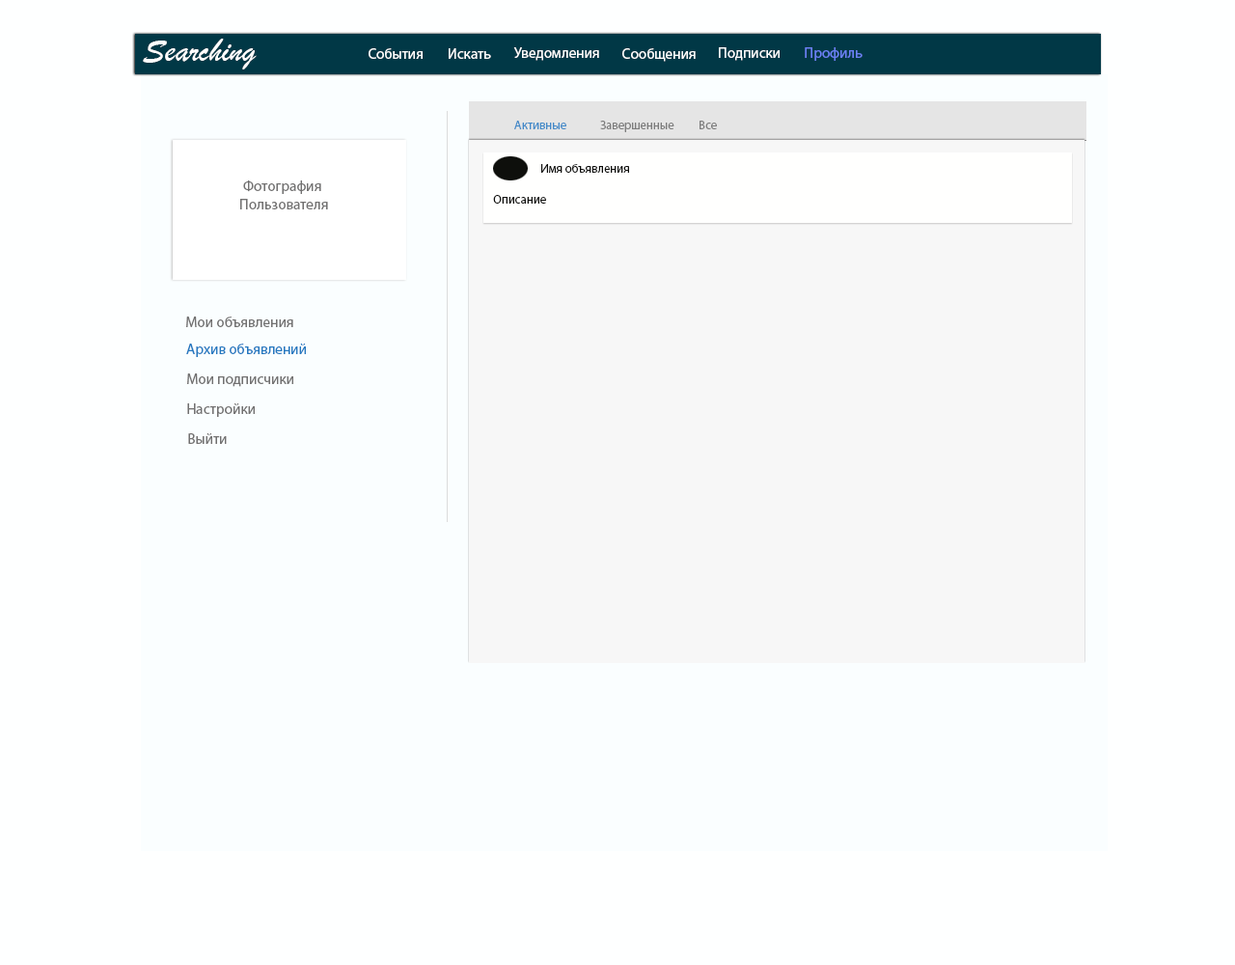
<style>
.page{position:relative;width:1235px;height:965px;background:#feffff}
.page>*{position:absolute;margin:0}
.t1{font:34.3px "BrushScriptMT";color:#ffffff}
.t2{font:14.7px "MyriadPro-Regular";color:#ffffff}
.t3{font:14.7px "MyriadPro-Regular";color:#6a81f6}
.t4{font:12.3px "MyriadPro-Regular";color:#4289c8}
.t5{font:12.3px "MyriadPro-Regular";color:#7c7c7c}
.t6{font:12.3px "MyriadPro-Regular";color:#0e0e0c}
.t7{font:14.7px "MyriadPro-Regular";color:#727171}
.t8{font:14.7px "MyriadPro-Regular";color:#2378c0}
</style>
<div class="page">
<p class="t1" style="left:143px;top:39px;width:114px;height:30px">Searching</p>
<p class="t2" style="left:369px;top:48px;width:54px;height:11px">События</p>
<p class="t2" style="left:449px;top:48px;width:42px;height:11px">Искать</p>
<p class="t2" style="left:513px;top:47px;width:86px;height:14px">Уведомления</p>
<p class="t2" style="left:623px;top:48px;width:73px;height:14px">Сообщения</p>
<p class="t2" style="left:719px;top:47px;width:61px;height:14px">Подписки</p>
<p class="t3" style="left:805px;top:47px;width:58px;height:14px">Профиль</p>
<p class="t4" style="left:514px;top:121px;width:53px;height:8px">Активные</p>
<p class="t5" style="left:600px;top:121px;width:75px;height:11px">Завершенные</p>
<p class="t5" style="left:700px;top:121px;width:17px;height:8px">Все</p>
<p class="t6" style="left:541px;top:164px;width:88px;height:9px">Имя объявления</p>
<p class="t7" style="left:240px;top:180px;width:88px;height:29px;text-align:center">Фотография <br>Пользователя</p>
<p class="t6" style="left:493px;top:195px;width:53px;height:9px">Описание</p>
<p class="t7" style="left:186px;top:317px;width:107px;height:10px">Мои объявления</p>
<p class="t8" style="left:186px;top:344px;width:120px;height:13px">Архив объявлений</p>
<p class="t7" style="left:187px;top:374px;width:106px;height:13px">Мои подписчики</p>
<p class="t7" style="left:187px;top:403px;width:68px;height:14px">Настройки</p>
<p class="t7" style="left:188px;top:433px;width:39px;height:11px">Выйти</p>
</div>
